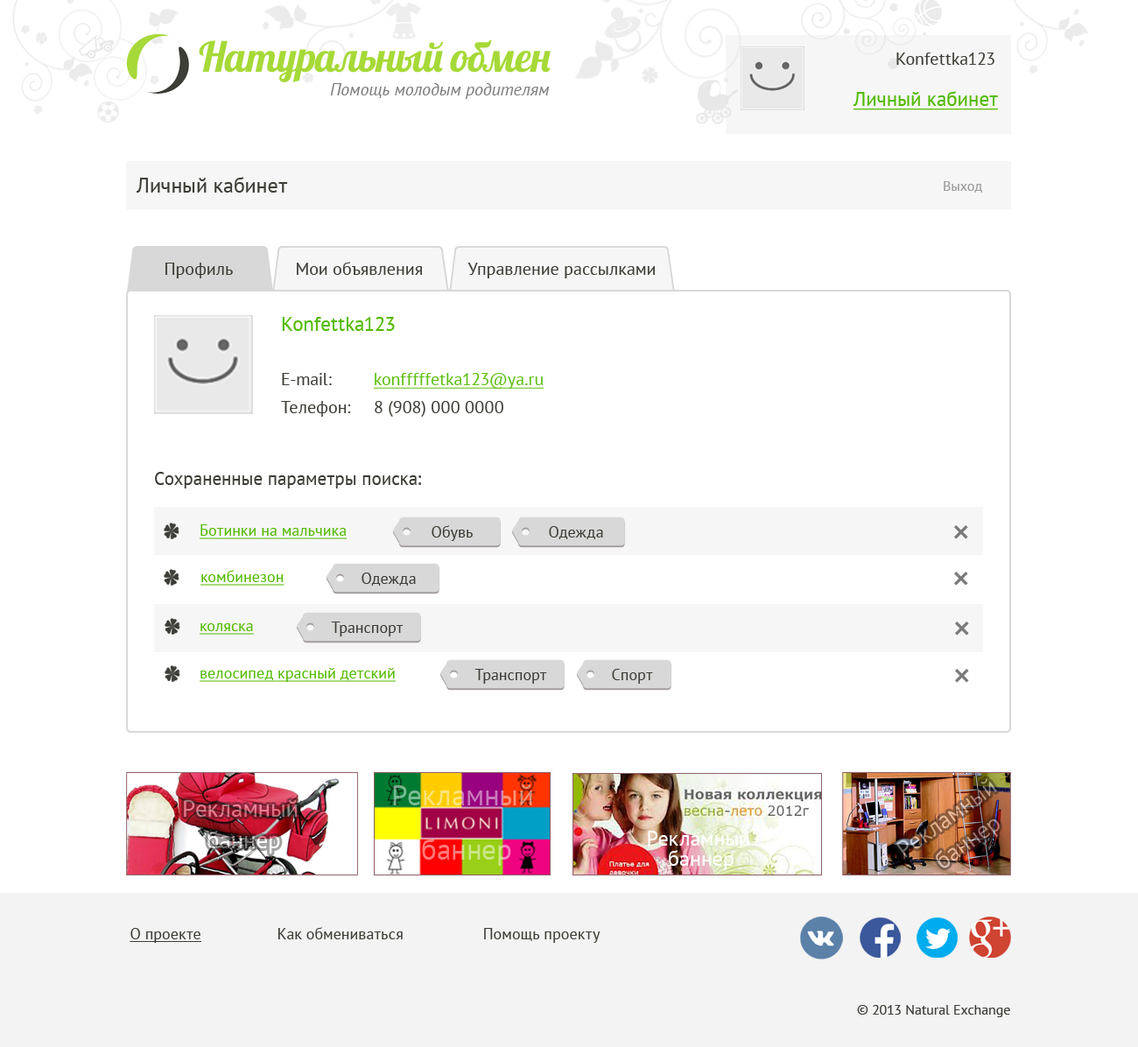
<style>
.page{position:relative;width:1138px;height:1047px;background:#ffffff}
.page>*{position:absolute;margin:0}
.t1{font:41.5px "Lobster";letter-spacing:-0.08em;color:#a6d937}
.t2{font:17.5px "PTSans-Regular";color:#3e3e38}
.t3{font:17.5px "PTSans-Italic";color:#7f7f7f}
.t4{font:20.1px "PTSans-Regular";color:#53ba00;text-decoration:underline}
.t5{font:21px "PTSans-Regular";color:#3e3e38}
.t6{font:14px "PTSans-Regular";color:#9c9c9c}
.t7{font:20.1px "PTSans-Regular";color:#53ba00}
.t8{font:17.5px/28px "PTSans-Regular";color:#3e3e38}
.t9{font:17.5px/28px "PTSans-Regular";color:#5ebf11;text-decoration:underline}
.t10{font:18.4px "PTSans-Regular";color:#3e3e38}
.t11{font:15.8px "PTSans-Regular";color:#53ba00;text-decoration:underline}
.t12{font:15.8px "PTSans-Regular";color:#3e3e38}
.t13{font:23.7px/31.6px "PTSans-Regular"}
.t14{font:21px/20.1px "PTSans-Regular";color:#ffffff}
.t15{font:15.8px "PTSans-Regular";color:#3e3e38;text-decoration:underline}
.t16{font:14px "PTSans-Regular";color:#3e3e38}
</style>
<div class="page">
<p class="t1" style="left:199px;top:40px;width:352px;height:42px">Натуральный  обмен</p>
<p class="t2" style="left:897px;top:53px;width:98px;height:12px">Konfettka123</p>
<p class="t3" style="left:330px;top:83px;width:220px;height:16px">Помощь молодым родителям</p>
<p class="t4" style="left:853px;top:91px;width:145px;height:19px">Личный кабинет</p>
<p class="t5" style="left:136px;top:177px;width:152px;height:16px">Личный кабинет</p>
<p class="t6" style="left:944px;top:181px;width:39px;height:12px">Выход</p>
<p class="t2" style="left:166px;top:263px;width:67px;height:15px">Профиль</p>
<p class="t2" style="left:297px;top:262px;width:125px;height:13px">Мои объявления</p>
<p class="t2" style="left:468px;top:263px;width:187px;height:15px">Управление рассылками</p>
<p class="t7" style="left:282px;top:317px;width:113px;height:14px">Konfettka123</p>
<p class="t8" style="left:281px;top:373px;width:264px;height:44px">E-mail:         <span class="t9">konfffffetka123@ya.ru<br></span>Телефон:     8 (908) 000 0000</p>
<p class="t10" style="left:155px;top:472px;width:266px;height:17px">Сохраненные параметры поиска:</p>
<p class="t11" style="left:200px;top:525px;width:148px;height:14px">Ботинки на мальчика</p>
<p class="t12" style="left:432px;top:525px;width:41px;height:16px">Обувь</p>
<p class="t12" style="left:549px;top:526px;width:54px;height:13px">Одежда</p>
<p class="t11" style="left:201px;top:570px;width:84px;height:16px">комбинезон</p>
<p class="t12" style="left:362px;top:573px;width:54px;height:13px">Одежда</p>
<p class="t11" style="left:200px;top:624px;width:54px;height:11px">коляска</p>
<p class="t12" style="left:331px;top:622px;width:73px;height:15px">Транспорт</p>
<p class="t11" style="left:200px;top:668px;width:196px;height:14px">велосипед красный детский</p>
<p class="t12" style="left:475px;top:669px;width:72px;height:15px">Транспорт</p>
<p class="t12" style="left:612px;top:669px;width:41px;height:15px">Спорт</p>
<p class="t13" style="left:896px;top:779px;width:104px;height:90px;text-align:center;rotate:-36deg">Рекламный <br>баннер</p>
<p class="t14" style="left:648px;top:831px;width:102px;height:39px;text-align:center">Рекламный <br>баннер</p>
<p class="t12" style="left:130px;top:927px;width:471px;height:16px"><span class="t15">О проекте</span>       Как обмениваться            Помощь  проекту</p>
<p class="t16" style="left:857px;top:1005px;width:154px;height:13px">© 2013 Natural Exchange</p>
</div>
